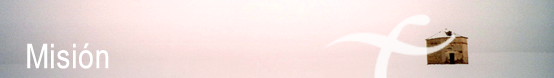
<style>
.page{position:relative;width:554px;height:78px}
.page>*{position:absolute;margin:0}
.t1{font:34px "ArialNarrow";color:#ffffff;font-weight:bold}
</style>
<div class="page">
<p class="t1" style="left:27px;top:43px;width:82px;height:26px">Misión</p>
</div>
